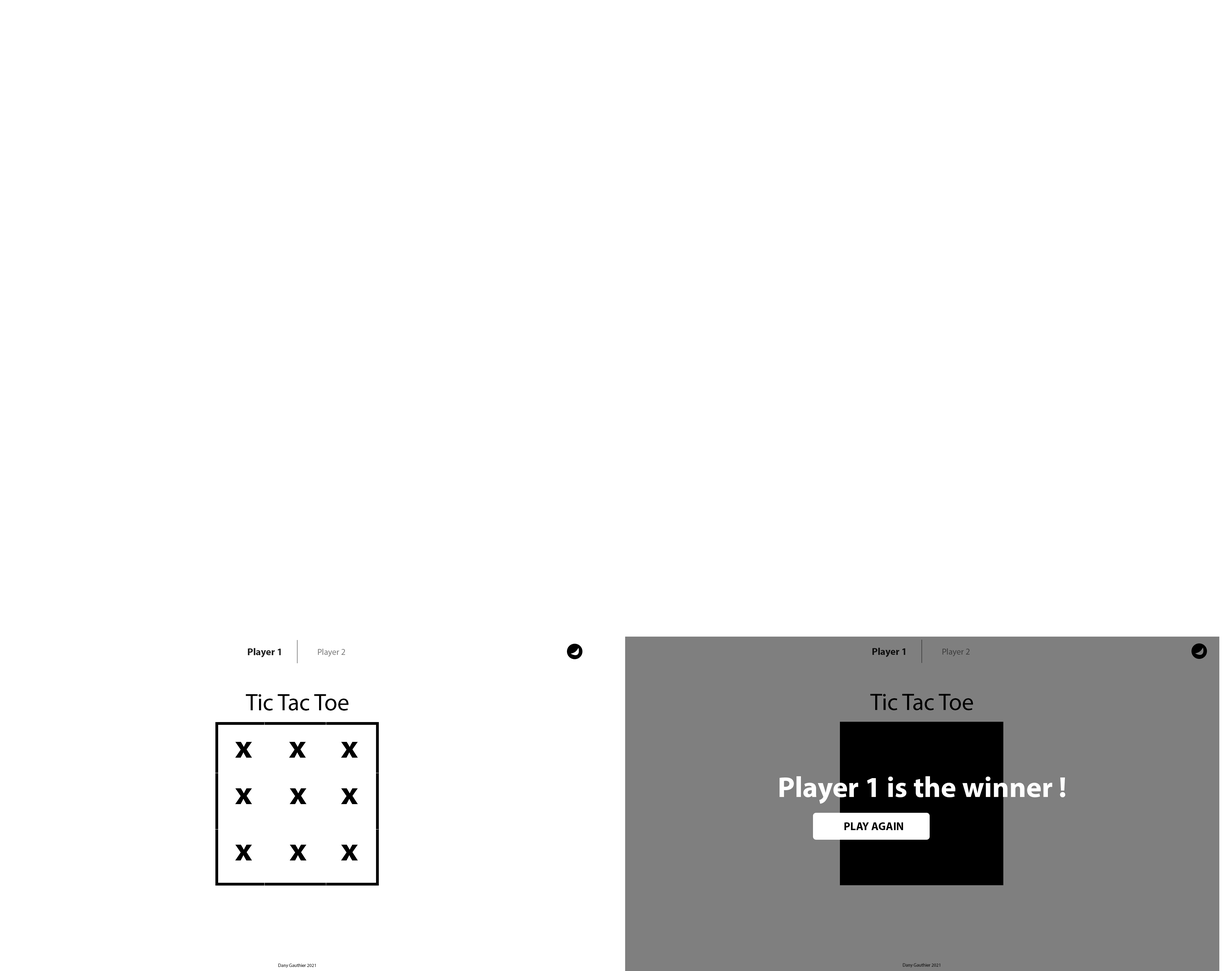
<style>
.page{position:relative;width:1228px;height:971px;background:#ffffff}
.page>*{position:absolute;margin:0}
.t1{font:10px "MyriadPro-Bold";color:#202020}
.t2{font:8.7px "MyriadPro-Regular";color:#797979}
.t3{font:8.7px "MyriadPro-Regular";color:#3c3c3c}
.t4{font:23.8px "MyriadPro-Regular";color:#000000}
.t5{font:32.8px "MyriadPro-Bold";color:#000000}
.t6{font:29.1px "MyriadPro-Bold";color:#ffffff}
.t7{font:11.1px "MyriadPro-Bold";color:#000000}
.t8{font:4.6px "MyriadPro-Regular";color:#202020}
</style>
<div class="page">
<p class="t1" style="left:248px;top:648px;width:33px;height:9px">Player 1</p>
<p class="t2" style="left:318px;top:649px;width:27px;height:8px">Player 2</p>
<p class="t1" style="left:873px;top:648px;width:32px;height:9px">Player 1</p>
<p class="t3" style="left:943px;top:648px;width:27px;height:8px">Player 2</p>
<p class="t4" style="left:246px;top:694px;width:103px;height:16px">Tic Tac Toe</p>
<p class="t4" style="left:870px;top:694px;width:103px;height:16px">Tic Tac Toe</p>
<p class="t5" style="left:235px;top:742px;width:17px;height:15px">x</p>
<p class="t5" style="left:289px;top:742px;width:17px;height:15px">x</p>
<p class="t5" style="left:341px;top:742px;width:17px;height:15px">x</p>
<p class="t6" style="left:780px;top:776px;width:286px;height:28px">Player 1 is the winner !</p>
<p class="t5" style="left:235px;top:788px;width:17px;height:16px">x</p>
<p class="t5" style="left:290px;top:788px;width:17px;height:16px">x</p>
<p class="t5" style="left:341px;top:788px;width:17px;height:16px">x</p>
<p class="t7" style="left:844px;top:822px;width:59px;height:8px">PLAY AGAIN</p>
<p class="t5" style="left:235px;top:844px;width:17px;height:16px">x</p>
<p class="t5" style="left:290px;top:844px;width:17px;height:16px">x</p>
<p class="t5" style="left:341px;top:844px;width:17px;height:16px">x</p>
<p class="t8" style="left:278px;top:963px;width:38px;height:5px">Dany Gauthier 2021</p>
<p class="t8" style="left:903px;top:963px;width:37px;height:4px">Dany Gauthier 2021</p>
</div>
